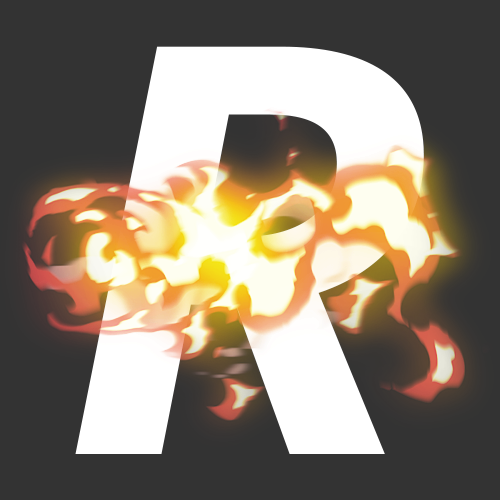
<style>
.page{position:relative;width:500px;height:500px;background:#333333}
.page>*{position:absolute;margin:0}
.t1{font:625px "SourceCodeItalic-BoldItalic";letter-spacing:0.125em;color:#ffffff}
</style>
<div class="page">
<p class="t1" style="left:75px;top:46px;width:349px;height:408px">R</p>
</div>
